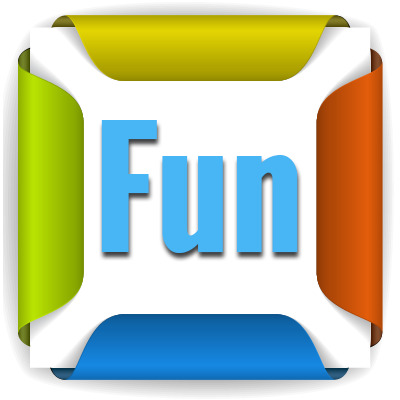
<style>
.page{position:relative;width:400px;height:400px;background:#ffffff}
.page>*{position:absolute;margin:0}
.t1{font:150px "Oswald-Bold";color:#48b5f4}
</style>
<div class="page">
<p class="t1" style="left:101px;top:120px;width:197px;height:133px">Fun</p>
</div>
